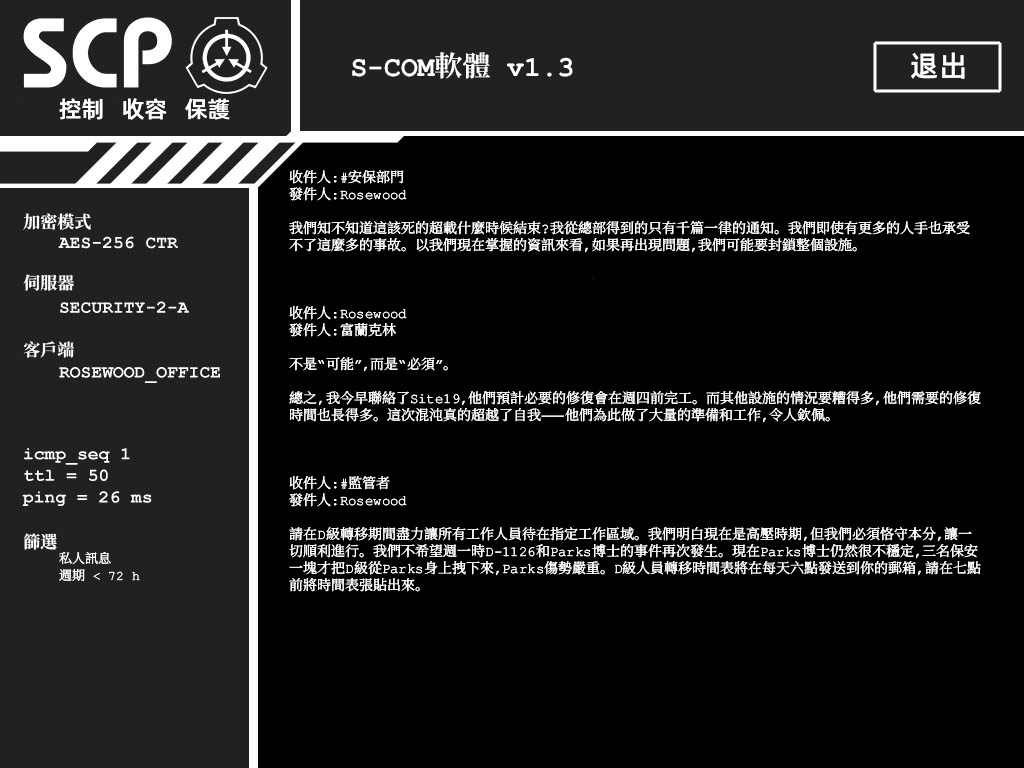
<style>
.page{position:relative;width:1024px;height:768px;background:#010101}
.page>*{position:absolute;margin:0}
.t1{font:28px "ContainmentBreach-Bold";color:#ffffff}
.t2{font:29px "AlibabaPuHuiTiM";color:#ffffff}
.t3{font:23px "AlibabaPuHuiTiM";color:#ffffff}
.t4{font:14px/17px "ContainmentBreach-Regular";color:#ffffff}
.t5{font:13px/21px "ContainmentBreach-Regular";color:#ffffff}
.t6{font:17px/19px "ContainmentBreach-Bold";color:#ffffff}
.t7{font:17px/23px "ContainmentBreach-Bold";color:#ffffff}
.t8{font:17px/25px "ContainmentBreach-Bold";color:#ffffff}
.t9{font:17px/15px "ContainmentBreach-Bold";color:#ffffff}
</style>
<div class="page">
<p class="t1" style="left:352px;top:52px;width:221px;height:27px">S-COM軟體 v1.3</p>
<p class="t2" style="left:911px;top:52px;width:54px;height:27px">退出</p>
<p class="t3" style="left:59px;top:98px;width:171px;height:22px">控制   收容   保護</p>
<p class="t4" style="left:289px;top:170px;width:692px;height:422px">收件人：#安保部門<br>發件人：Rosewood<br><br>我們知不知道這該死的超載什麼時候結束？我從總部得到的只有千篇一律的通知。我們即使有更多的人手也承受<br>不了這麼多的事故。以我們現在掌握的資訊來看，如果再出現問題，我們可能要封鎖整個設施。<br><br><br><br>收件人：Rosewood<br>發件人：富蘭克林<br><br>不是“可能”，而是“必須”。<br><br>總之，我今早聯絡了Site19，他們預計必要的修復會在週四前完工。而其他設施的情況要糟得多，他們需要的修復<br>時間也長得多。這次混沌真的超越了自我——他們為此做了大量的準備和工作，令人欽佩。<br><br><br><br>收件人：#監管者<br>發件人：Rosewood<br><br>請在D級轉移期間盡力讓所有工作人員待在指定工作區域。我們明白現在是高壓時期，但我們必須恪守本分，讓一<br>切順利進行。我們不希望週一時D-1126和Parks博士的事件再次發生。現在Parks博士仍然很不穩定，三名保安<br>一塊才把D級從Parks身上拽下來，Parks傷勢嚴重。D級人員轉移時間表將在每天六點發送到你的郵箱，請在七點<br>前將時間表張貼出來。</p>
<p class="t5" style="left:23px;top:213px;width:117px;height:368px"><span class="t6">加密模式<br><br></span><span class="t7"><br>伺服器<br><br></span><span class="t8"><br>客戶端<br> <br><br><br><br><br><br></span><span class="t9">篩選<br> </span>私人訊息<br> 週期 &lt; 72 h</p>
</div>
